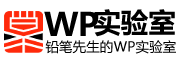
<style>
.page{position:relative;width:180px;height:65px;background:#ffffff}
.page>*{position:absolute;margin:0}
.t1{font:31.9px "MicrosoftYaHei";letter-spacing:-0.02em;color:#000000}
.t2{font:31.9px "MicrosoftYaHei";color:#000000}
.t3{font:27.6px "MicrosoftYaHei";color:#000000}
.t4{font:13.6px "MicrosoftYaHei";color:#000000}
</style>
<div class="page">
<p class="t1" style="left:44px;top:11px;width:54px;height:25px">W<span class="t2">P</span></p>
<p class="t3" style="left:94px;top:9px;width:81px;height:28px">实验室</p>
<p class="t4" style="left:45px;top:40px;width:131px;height:14px">铅笔先生的WP实验室</p>
</div>
